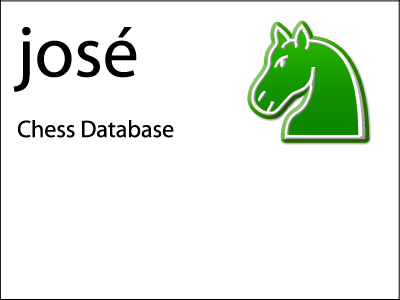
<style>
.page{position:relative;width:400px;height:300px;background:#ffffff}
.page>*{position:absolute;margin:0}
.t1{font:24px/10.1px "Myriad-Roman";color:#000000}
.t2{font:72px/10.1px "Myriad-Roman";color:#000000}
</style>
<div class="page">
<p class="t1" style="left:13px;top:27px;width:161px;height:111px"><span class="t2">josé<br><br><br><br><br><br></span>Chess Database</p>
</div>
